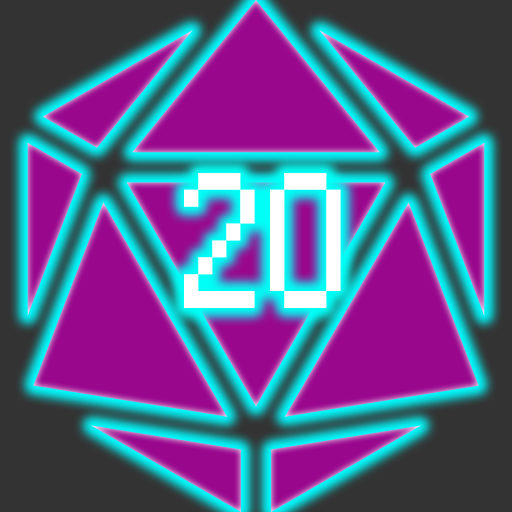
<style>
.page{position:relative;width:512px;height:512px;background:#99078d}
.page>*{position:absolute;margin:0}
.t1{font:180px "Small Fonts";letter-spacing:0.01em;color:#ffffff}
</style>
<div class="page">
<p class="t1" style="left:184px;top:173px;width:157px;height:135px">20</p>
</div>
